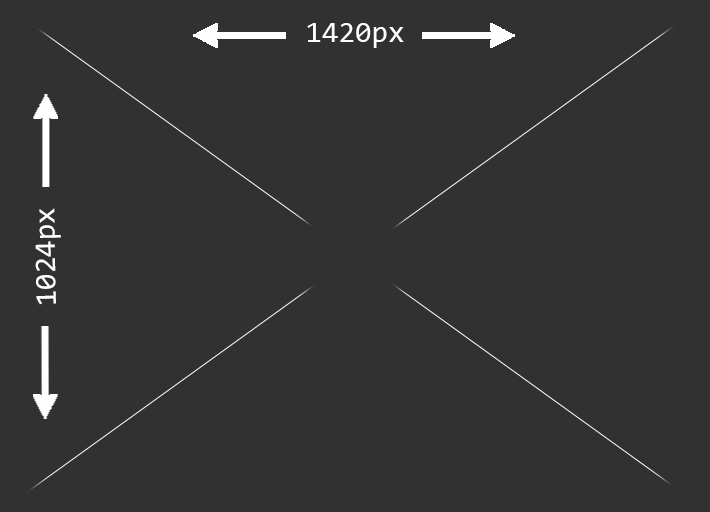
<style>
.page{position:relative;width:710px;height:512px;background:#313131}
.page>*{position:absolute;margin:0}
.t1{font:30px "Consolas";color:#fffefe}
</style>
<div class="page">
<p class="t1" style="left:307px;top:23px;width:97px;height:25px">1420px</p>
<p class="t1" style="left:35px;top:208px;width:26px;height:97px;rotate:179deg">1024px</p>
</div>
